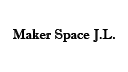
<style>
.page{position:relative;width:128px;height:72px;background:#ffffff}
.page>*{position:absolute;margin:0}
.t1{font:14.1px "ImprintMT-Shadow";color:#000000}
</style>
<div class="page">
<p class="t1" style="left:13px;top:29px;width:102px;height:13px">Maker Space J.L.</p>
</div>
